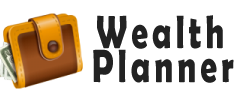
<style>
.page{position:relative;width:240px;height:110px;background:#ffffff}
.page>*{position:absolute;margin:0}
.t1{font:47px "BerlinSansFBDemi-Bold";letter-spacing:0.12em;color:#222222;scale:0.71 1}
</style>
<div class="page">
<p class="t1" style="left:97px;top:15px;width:126px;height:34px">Wealth</p>
<p class="t1" style="left:93px;top:49px;width:141px;height:34px">Planner</p>
</div>
